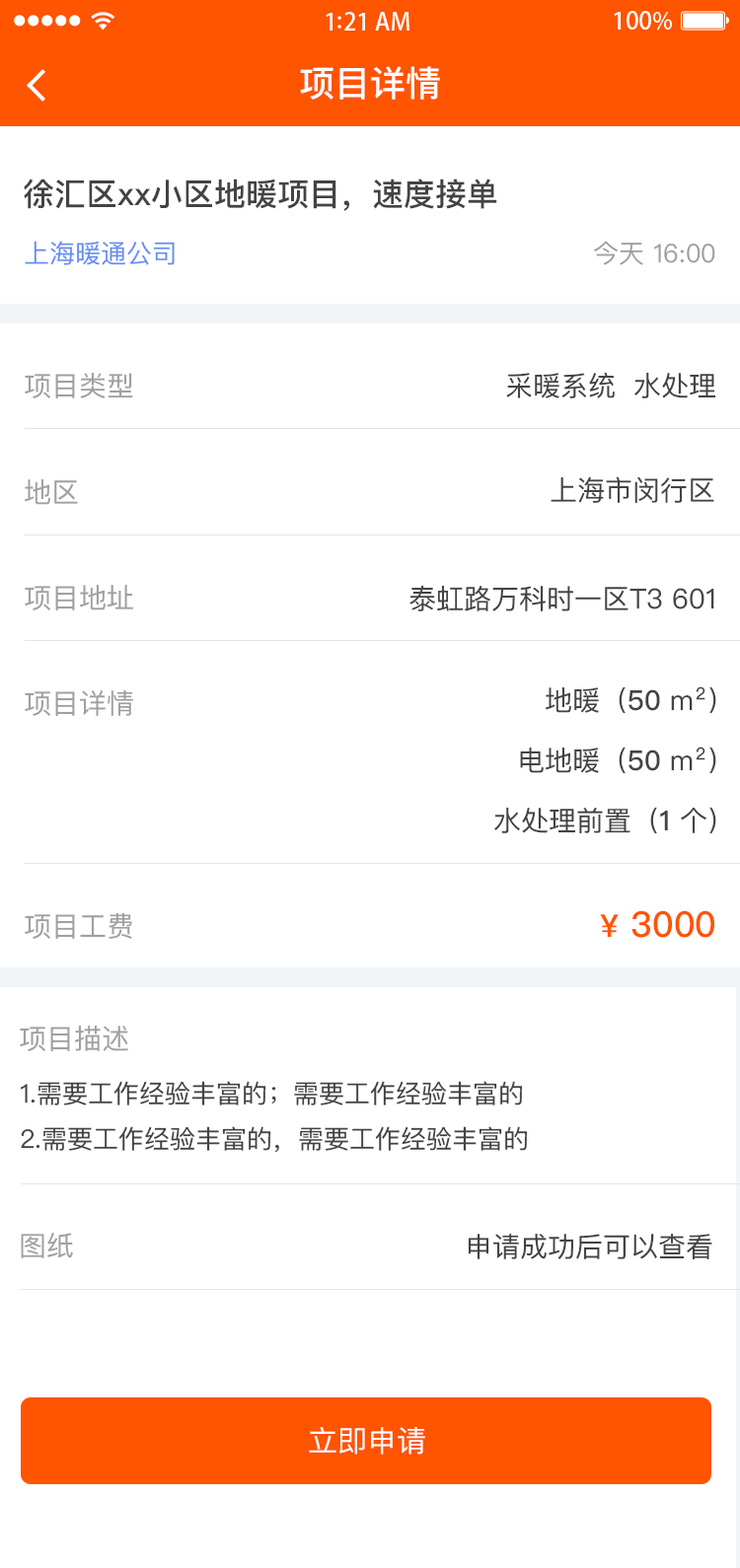
<style>
.page{position:relative;width:740px;height:1568px;background:#ffffff}
.page>*{position:absolute;margin:0}
.t1{font:35.5px "PingFangSC-Medium";color:#ffffff}
.t2{font:31.6px "PingFangSC-Medium";color:#434343}
.t3{font:25.6px "PingFangSC-Regular";color:#648df6}
.t4{font:25.6px "PingFangSC-Regular";color:#a0a0a0}
.t5{font:27.6px "PingFangSC-Regular";color:#a0a0a0}
.t6{font:27.6px "PingFangSC-Regular";color:#434343}
.t7{font:27.6px/64.1px "PingFangSC-Regular";color:#434343}
.t8{font:27.6px/64.1px "PingFangSC-Medium";color:#434343}
.t9{font:35.5px "PingFangSC-Medium";color:#ff5400}
.t10{font:31.6px "PingFangSC-Medium";color:#ff5400}
.t11{font:25.6px/49.3px "PingFangSC-Regular";color:#434343}
.t12{font:29.6px "PingFangSC-Regular";color:#ffffff;text-transform:uppercase}
</style>
<div class="page">
<p class="t1" style="left:300px;top:66px;width:140px;height:34px">项目详情</p>
<p class="t2" style="left:24px;top:178px;width:473px;height:33px">徐汇区xx小区地暖项目，速度接单</p>
<p class="t3" style="left:25px;top:241px;width:150px;height:24px">上海暖通公司</p>
<p class="t4" style="left:594px;top:241px;width:121px;height:24px">今天 16:00</p>
<p class="t5" style="left:25px;top:373px;width:108px;height:25px">项目类型</p>
<p class="t6" style="left:506px;top:372px;width:209px;height:26px">采暖系统  水处理</p>
<p class="t5" style="left:25px;top:479px;width:53px;height:26px">地区</p>
<p class="t6" style="left:550px;top:476px;width:164px;height:27px">上海市闵行区</p>
<p class="t5" style="left:25px;top:585px;width:108px;height:25px">项目地址</p>
<p class="t6" style="left:409px;top:585px;width:305px;height:26px">泰虹路万科时一区T3 601</p>
<p class="t7" style="left:494px;top:686px;width:222px;height:148px;text-align:right">地暖（<span class="t8">50 </span>m²）<br>电地暖（<span class="t8">50 </span>m²）<br>水处理前置（<span class="t8">1 </span>个）</p>
<p class="t5" style="left:25px;top:690px;width:108px;height:26px">项目详情</p>
<p class="t5" style="left:25px;top:913px;width:107px;height:26px">项目工费</p>
<p class="t9" style="left:600px;top:910px;width:114px;height:28px"><span class="t10">¥</span> 3000</p>
<p class="t5" style="left:20px;top:1026px;width:108px;height:25px">项目描述</p>
<p class="t11" style="left:21px;top:1081px;width:507px;height:72px">1.需要工作经验丰富的；需要工作经验丰富的<br>2.需要工作经验丰富的，需要工作经验丰富的</p>
<p class="t5" style="left:21px;top:1233px;width:52px;height:25px">图纸</p>
<p class="t6" style="left:467px;top:1234px;width:245px;height:25px">申请成功后可以查看</p>
<p class="t12" style="left:309px;top:1427px;width:116px;height:28px">立即申请</p>
</div>
